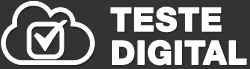
<style>
.page{position:relative;width:250px;height:69px;background:#333333}
.page>*{position:absolute;margin:0}
.t1{font:56.2px/33.2px "HelveticaNeueLTStd-Hv";color:#ffffff;font-weight:bold}
</style>
<div class="page">
<p class="t1" style="left:110px;top:6px;width:137px;height:60px">TESTE <br>DIGITAL</p>
</div>
